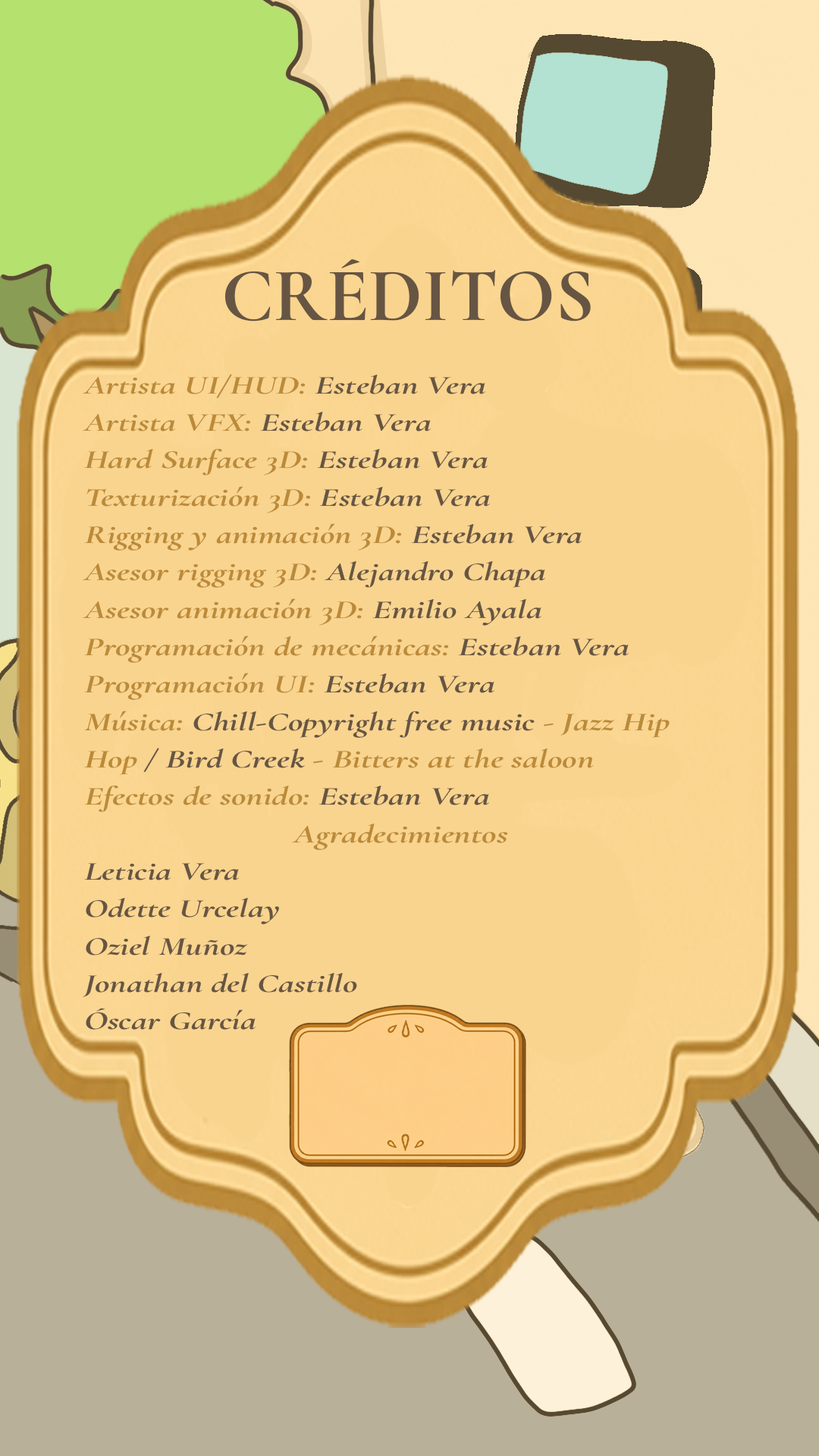
<style>
.page{position:relative;width:819px;height:1456px;background:#f9d48f}
.page>*{position:absolute;margin:0}
.t1{font:76.4px "CormorantGaramond-Bold";color:#675543}
.t2{font:26.2px/37.4px "CormorantGaramondItalic-BoldItalic";color:#675543;scale:1.37 1}
.t3{font:26.2px/37.4px "CormorantGaramondItalic-BoldItalic";color:#bb8a39;scale:1.37 1}
</style>
<div class="page">
<p class="t1" style="left:224px;top:259px;width:367px;height:63px">CRÉDITOS</p>
<p class="t2" style="left:83px;top:374px;width:587px;height:656px"><span class="t3">Artista UI/HUD: </span>Esteban Vera<br><span class="t3">Artista VFX: </span>Esteban Vera<br><span class="t3">Hard Surface 3D: </span>Esteban Vera<br><span class="t3">Texturización 3D: </span>Esteban Vera<br><span class="t3">Rigging y animación 3D: </span>Esteban Vera<br><span class="t3">Asesor rigging 3D: </span>Alejandro Chapa<br><span class="t3">Asesor animación 3D: </span>Emilio Ayala<br><span class="t3">Programación de mecánicas: </span>Esteban Vera<br><span class="t3">Programación UI: </span>Esteban Vera<br><span class="t3">Música: </span>Chill-Copyright free music<span class="t3"> - Jazz Hip<br>Hop </span>/ Bird Creek<span class="t3"> - Bitters at the saloon<br>Efectos de sonido: </span>Esteban Vera<br><span class="t3">                         Agradecimientos<br></span>Leticia Vera<br>Odette Urcelay<br>Oziel Muñoz<br>Jonathan del Castillo<br>Óscar García</p>
</div>
